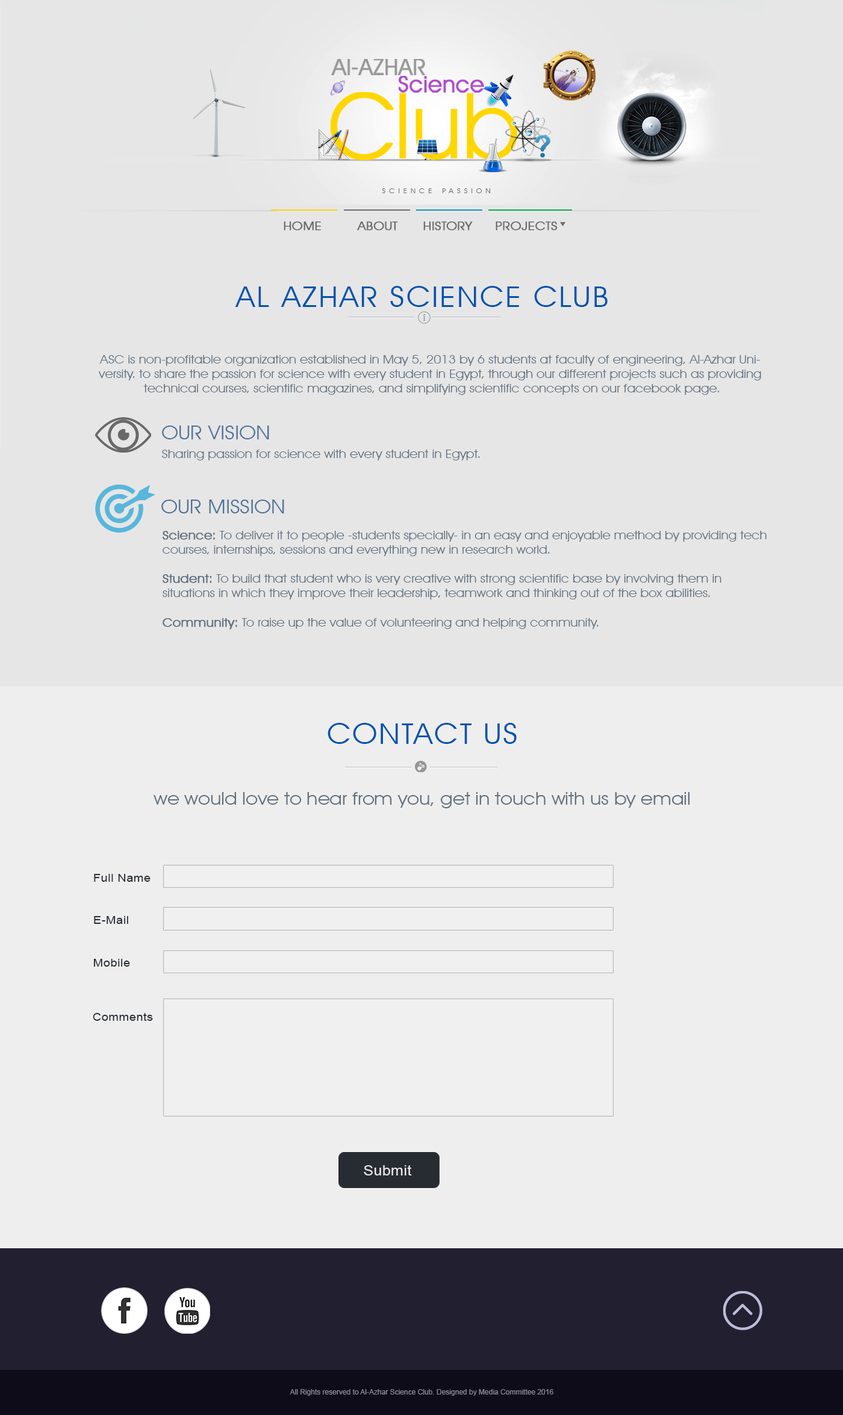
<style>
.page{position:relative;width:843px;height:1415px;background:#e6e6e6}
.page>*{position:absolute;margin:0}
.t1{font:12.3px "AvantGardeITCbyBT-Book";color:#6c6c6c;font-weight:bold;scale:1.11 1}
.t2{font:28.8px "AvantGardeITCbyBT-Book";letter-spacing:0.05em;color:#0053ad;font-variant:small-caps;scale:1.1 1}
.t3{font:12.1px "AvantGardeITCbyBT-Book";letter-spacing:-0.01em;color:#60707f;scale:1.1 1}
.t4{font:19.6px "AvantGardeITCbyBT-Book";color:#4f7298;scale:1.1 1}
.t5{font:12.1px "AvantGardeITCbyBT-Book";letter-spacing:-0.01em;color:#60707f;font-weight:bold;scale:1.1 1}
.t6{font:18.1px "AvantGardeITCbyBT-Book";letter-spacing:-0.01em;color:#60707f;scale:1.1 1}
.t7{font:10.9px "ArialMT";letter-spacing:0.025em;color:#272c33;scale:1.1 1}
.t8{font:13.5px "ArialMT";letter-spacing:0.025em;color:#e6e6e6;scale:1.1 1}
</style>
<div class="page">
<p class="t1" style="left:283px;top:222px;width:38px;height:9px">HOME</p>
<p class="t1" style="left:357px;top:222px;width:41px;height:9px">ABOUT</p>
<p class="t1" style="left:423px;top:222px;width:49px;height:9px">HISTORY</p>
<p class="t1" style="left:495px;top:222px;width:62px;height:9px">PROJECTS</p>
<p class="t2" style="left:235px;top:286px;width:372px;height:21px">AL AZHAR SCIENCE CLUB</p>
<p class="t3" style="left:98px;top:355px;width:663px;height:40px;text-align:center">ASC is non-profitable organization established in May 5, 2013 by 6 students at faculty of engineering, Al-Azhar Uni-<br>versity. to share the passion for science with every student in Egypt, through our different projects such as providing<br> technical courses, scientific magazines, and simplifying scientific concepts on our facebook page.</p>
<p class="t4" style="left:162px;top:426px;width:107px;height:13px">OUR VISION</p>
<p class="t3" style="left:162px;top:450px;width:318px;height:10px">Sharing passion for science with every student in Egypt.</p>
<p class="t4" style="left:161px;top:500px;width:123px;height:13px">OUR MISSION</p>
<p class="t3" style="left:163px;top:531px;width:603px;height:99px"><span class="t5">Science:</span> To deliver it to people -students specially- in an easy and enjoyable method by providing tech<br>courses, internships, sessions and everything new in research world. <br><br><span class="t5">Student:</span> To build that student who is very creative with strong scientific base by involving them in<br>situations in which they improve their leadership, teamwork and thinking out of the box abilities. <br><br><span class="t5">Community:</span> To raise up the value of volunteering and helping community.</p>
<p class="t2" style="left:327px;top:723px;width:189px;height:21px">CONTACT US</p>
<p class="t6" style="left:153px;top:792px;width:537px;height:16px">we would love to hear from you, get in touch with us by email</p>
<p class="t7" style="left:94px;top:874px;width:56px;height:8px">Full Name</p>
<p class="t7" style="left:94px;top:916px;width:34px;height:8px">E-Mail</p>
<p class="t7" style="left:93px;top:959px;width:37px;height:8px">Mobile</p>
<p class="t7" style="left:93px;top:1012px;width:60px;height:9px">Comments</p>
<p class="t8" style="left:364px;top:1165px;width:48px;height:11px">Submit</p>
</div>
